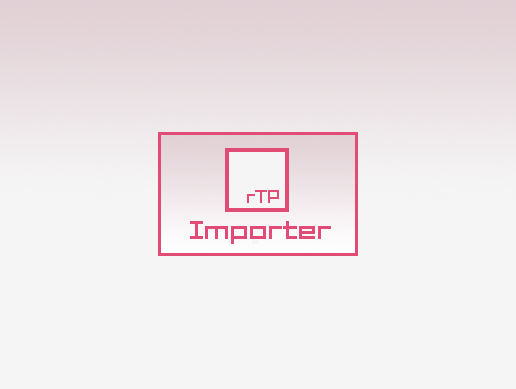
<style>
.page{position:relative;width:516px;height:389px;background:#f5f5f5}
.page>*{position:absolute;margin:0}
.t1{font:20px "GrixelAcme7Wide";color:#e04c75}
</style>
<div class="page">
<p class="t1" style="left:190px;top:221px;width:141px;height:23px">Importer</p>
</div>
